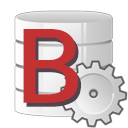
<style>
.page{position:relative;width:128px;height:128px;background:#ffffff}
.page>*{position:absolute;margin:0}
.t1{font:110px "SimHei";letter-spacing:-0.05em;color:#c33232;scale:1.18 1}
.t2{font:110px "SimHei";letter-spacing:-0.05em;scale:1.18 1}
</style>
<div class="page">
<p class="t1" style="left:23px;top:29px;width:55px;height:74px">B</p>
<p class="t2" style="left:26px;top:33px;width:55px;height:74px">B</p>
</div>
